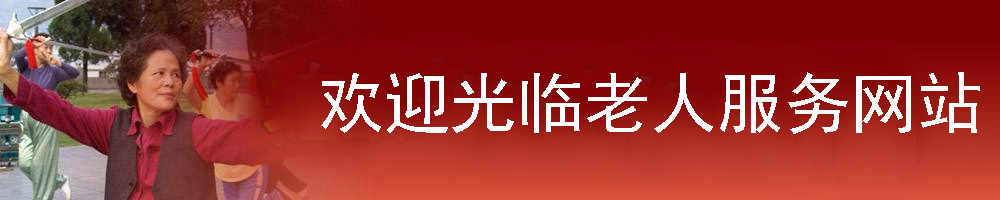
<style>
.page{position:relative;width:1000px;height:200px}
.page>*{position:absolute;margin:0}
.t1{font:66.7px "SimHei";color:#ffffff}
</style>
<div class="page">
<p class="t1" style="left:321px;top:72px;width:659px;height:62px">欢迎光临老人服务网站</p>
</div>
